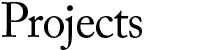
<style>
.page{position:relative;width:200px;height:50px;background:#ffffff}
.page>*{position:absolute;margin:0}
.t1{font:48px "ACaslonPro-Regular";letter-spacing:-0.025em;color:#000000}
</style>
<div class="page">
<p class="t1" style="left:1px;top:2px;width:141px;height:48px">Projects</p>
</div>
